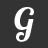
<style>
.page{position:relative;width:48px;height:48px;background:#333333}
.page>*{position:absolute;margin:0}
.t1{font:36px "Lobster1.4";color:#ffffff}
</style>
<div class="page">
<p class="t1" style="left:14px;top:7px;width:20px;height:35px">G</p>
</div>
